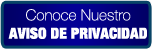
<style>
.page{position:relative;width:152px;height:49px}
.page>*{position:absolute;margin:0}
.t1{font:15.3px "HelveticaNeueLT-ExtBlackCond";color:#ffffff}
.t2{font:15.3px "HelveticaNeueCE-Thin";color:#ffffff}
</style>
<div class="page">
<p class="t1" style="left:8px;top:9px;width:139px;height:30px;text-align:center"><span class="t2">Conoce Nuestro<br></span>AVISO DE PRIVACIDAD</p>
</div>
